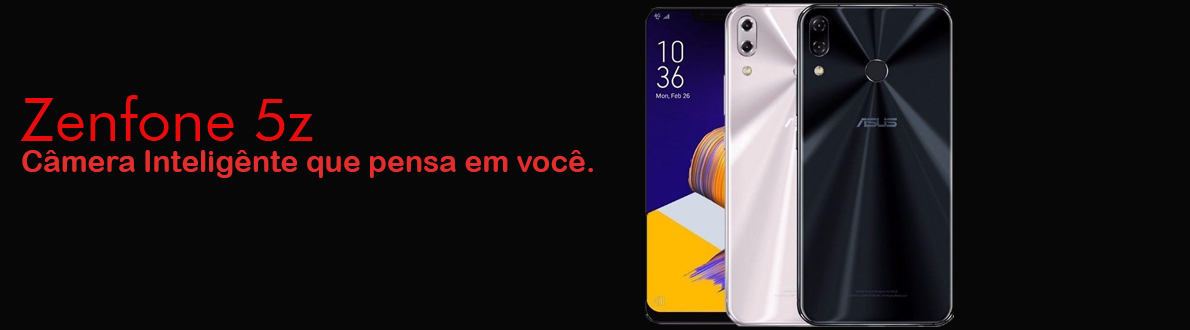
<style>
.page{position:relative;width:1190px;height:330px;background:#080707}
.page>*{position:absolute;margin:0}
.t1{font:60px "FuturaBT-Book";color:#e80c0c}
.t2{font:30px "ArialRoundedMTBold";color:#e32e2e}
</style>
<div class="page">
<p class="t1" style="left:20px;top:95px;width:293px;height:46px">Zenfone 5z</p>
<p class="t2" style="left:22px;top:150px;width:571px;height:28px">Câmera Inteligênte que pensa em você.</p>
</div>
